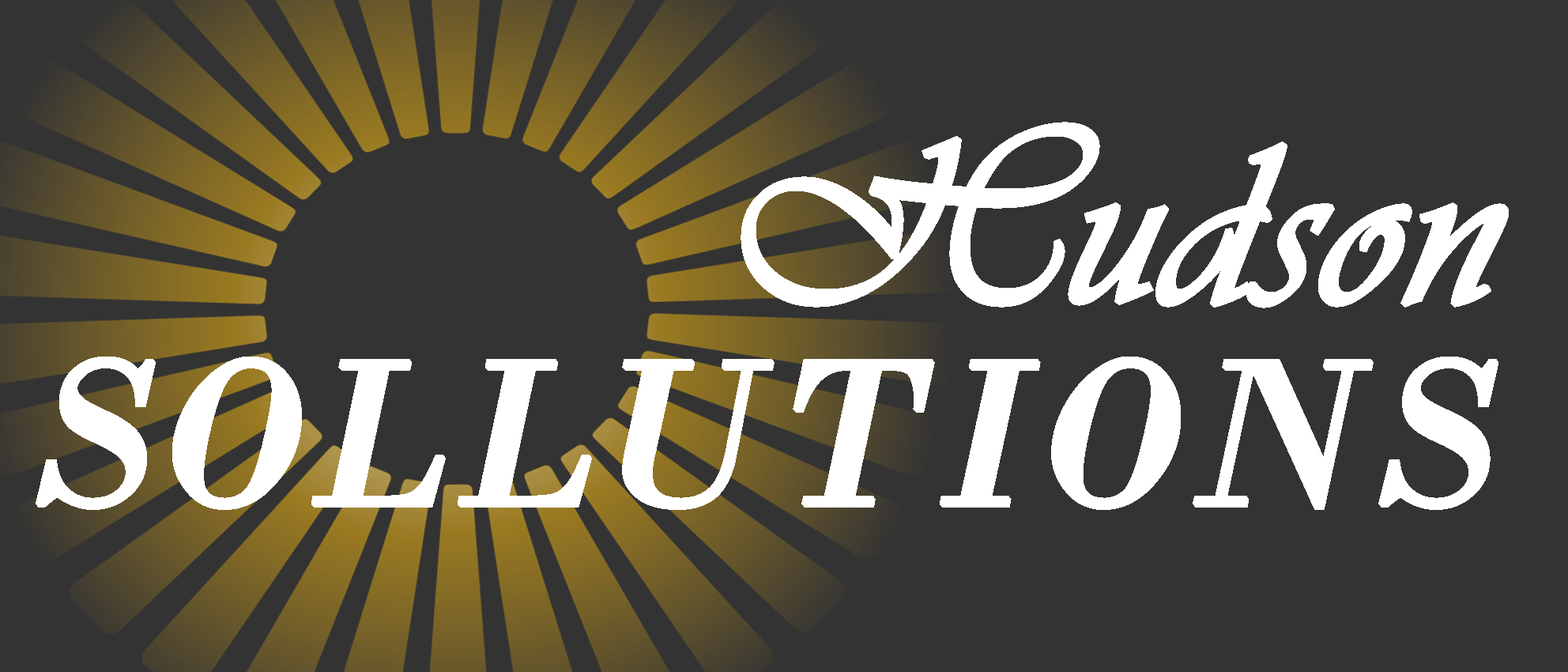
<style>
.page{position:relative;width:1568px;height:672px;background:#333333}
.page>*{position:absolute;margin:0}
.t1{font:237.1px "Vivaldii";color:#ffffff;font-weight:bold}
.t2{font:217.3px "BodoniMT-Italic";color:#ffffff;font-weight:bold}
</style>
<div class="page">
<p class="t1" style="left:741px;top:122px;width:768px;height:186px">Hudson</p>
<p class="t2" style="left:36px;top:356px;width:1462px;height:154px">SOLLUTIONS</p>
</div>
